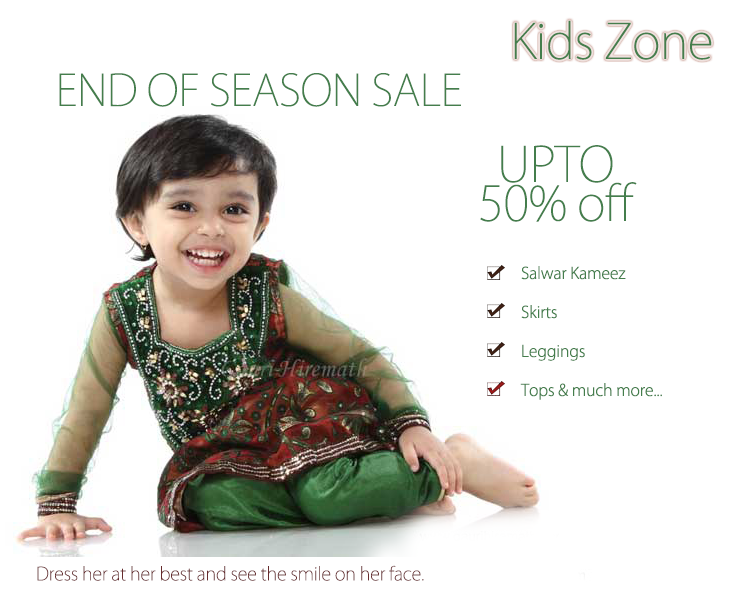
<style>
.page{position:relative;width:735px;height:599px;background:#ffffff}
.page>*{position:absolute;margin:0}
.t1{font:48px "KozGoPr6N-ExtraLight";letter-spacing:-0.01em;color:#447e4c}
.t2{font:43px "KozGoPr6N-ExtraLight";letter-spacing:-0.01em;color:#447e4c}
.t3{font:48px/39px "KozGoPr6N-ExtraLight";letter-spacing:-0.01em;color:#447e4c}
.t4{font:16px/39px "KozGoPr6N-Light";letter-spacing:-0.01em;color:#447e4c}
.t5{font:18px "KozGoPr6N-ExtraLight";letter-spacing:-0.01em;color:#662b2d}
</style>
<div class="page">
<p class="t1" style="left:514px;top:20px;width:198px;height:40px">Kids Zone</p>
<p class="t2" style="left:59px;top:73px;width:402px;height:34px">END OF SEASON SALE</p>
<p class="t3" style="left:480px;top:145px;width:157px;height:77px;text-align:center">UPTO <br>50% off</p>
<p class="t4" style="left:520px;top:266px;width:142px;height:134px">Salwar Kameez<br>Skirts<br>Leggings<br>Tops &amp; much more...</p>
<p class="t5" style="left:37px;top:565px;width:387px;height:16px">Dress her at her best and see the smile on her face.</p>
</div>
